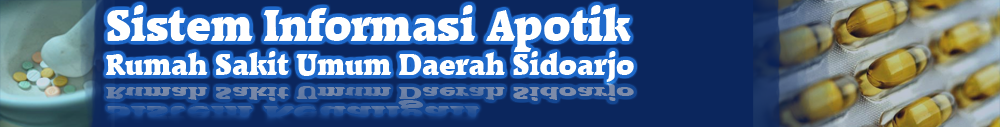
<style>
.page{position:relative;width:1000px;height:127px;background:#0b265d}
.page>*{position:absolute;margin:0}
.t1{font:28px "Plumb";color:#fffffe}
.t2{font:41.9px "Plumb";color:#fffffe}
</style>
<div class="page">
<p class="t1" style="left:105px;top:5px;width:529px;height:77px"><span class="t2">Sistem Informasi Apotik<br></span>Rumah Sakit Umum Daerah Sidoarjo</p>
</div>
